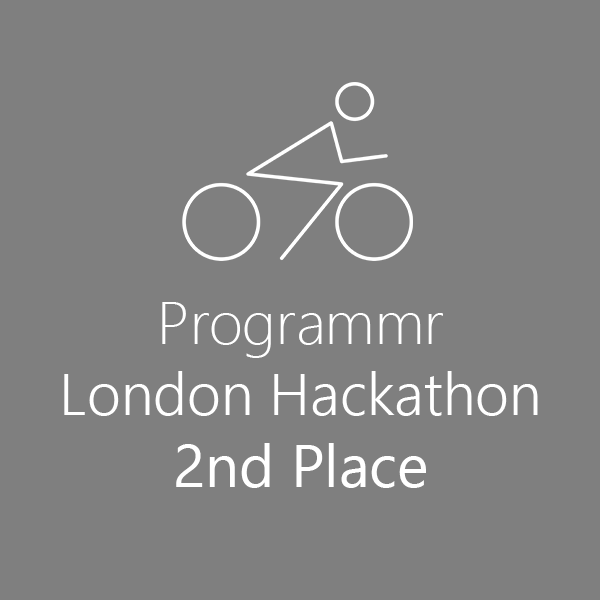
<style>
.page{position:relative;width:600px;height:600px;background:#7f7f7f}
.page>*{position:absolute;margin:0}
.t1{font:59px "SegoeUI-Semilight";color:#ffffff}
.t2{font:60px "SegoeUI-Light";color:#ffffff}
.t3{font:60px "SegoeUI";color:#ffffff}
</style>
<div class="page">
<p class="t1" style="left:64px;top:302px;width:474px;height:186px;text-align:center"><span class="t2">Programmr<br></span>London Hackathon<br><span class="t3">2nd Place</span></p>
</div>
